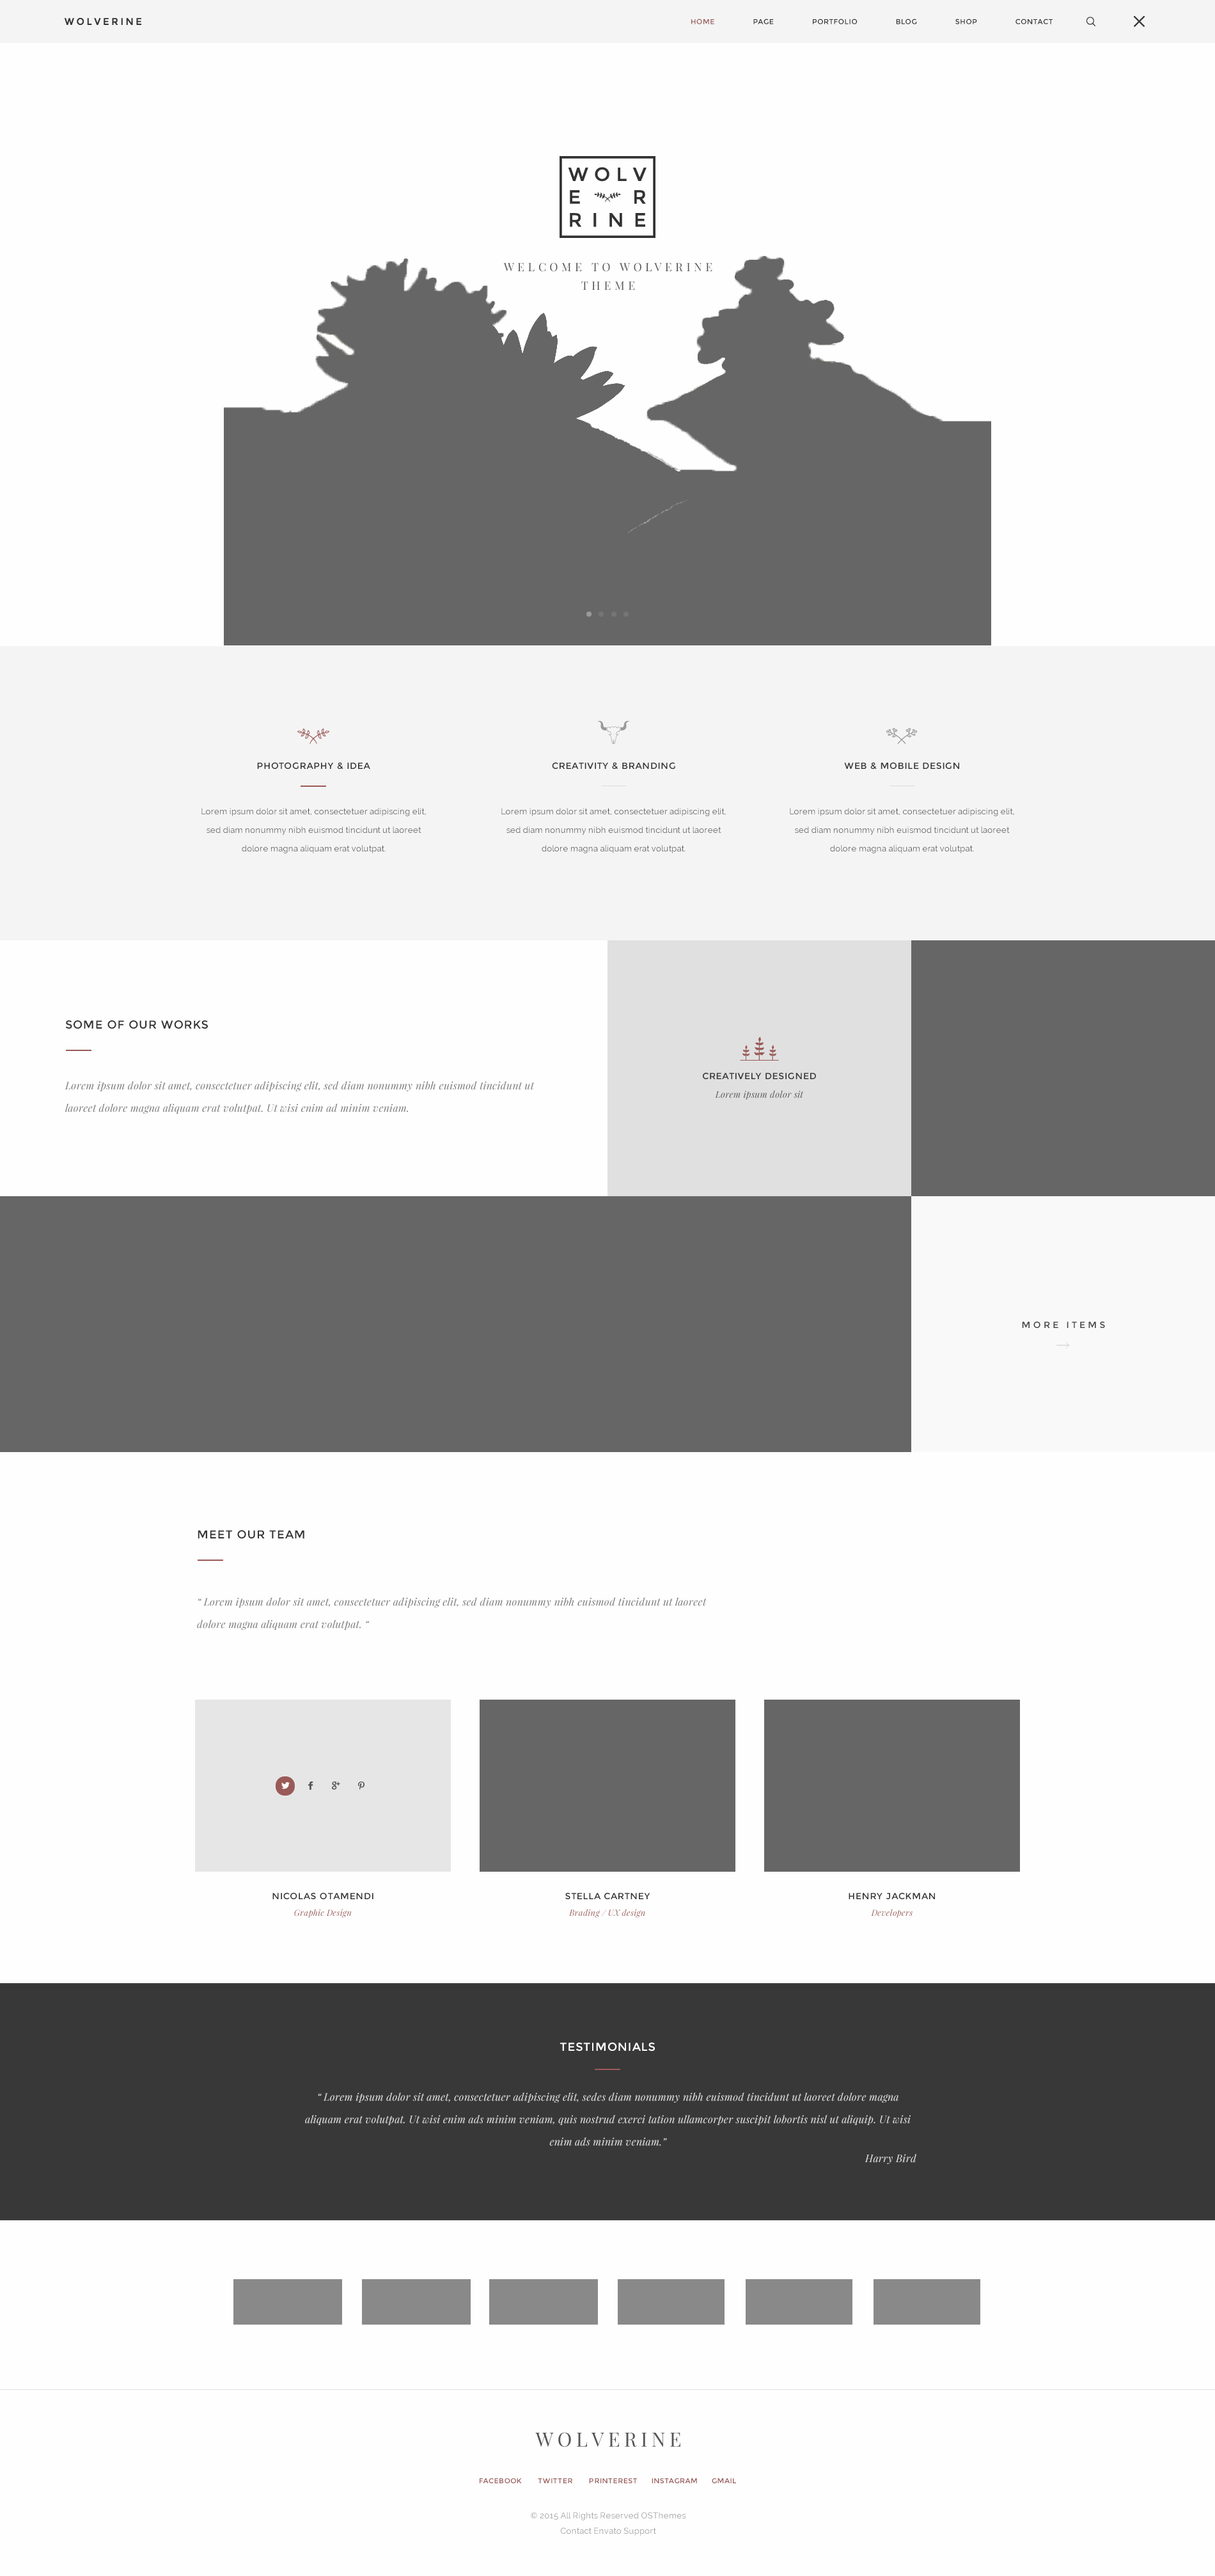
<style>
.page{position:relative;width:1215px;height:2576px;background:#fefefe}
.page>*{position:absolute;margin:0}
.t1{font:7.2px "Montserrat-Regular";letter-spacing:0.05em;color:#333333}
.t2{font:7.2px "Montserrat-Regular";letter-spacing:0.05em;color:#995958}
.t3{font:11.5px/18.4px "PlayfairDisplay-Regular";letter-spacing:0.3em;color:#555555}
.t4{font:9px "Montserrat-Regular";letter-spacing:0.05em;color:#333333}
.t5{font:8.3px/18.3px "Raleway";letter-spacing:0.02em;color:#555555}
.t6{font:11.5px "Montserrat-Regular";letter-spacing:0.05em;color:#333333}
.t7{font:10.2px/22.5px "PlayfairDisplay-Italic";letter-spacing:0.02em;color:#777777}
.t8{font:9px "PlayfairDisplay-Italic";letter-spacing:0.02em;color:#545454}
.t9{font:9px "Montserrat-Regular";letter-spacing:0.3em;color:#444444}
.t10{font:8.3px "PlayfairDisplay-Italic";letter-spacing:0.02em;color:#995958}
.t11{font:11.5px "Montserrat-Regular";letter-spacing:0.05em;color:#ffffff}
.t12{font:10.2px/22.5px "PlayfairDisplay-Italic";letter-spacing:0.02em;color:#dddddd}
.t13{font:10.2px/16.4px "PlayfairDisplay-Italic";letter-spacing:0.02em;color:#dddddd}
.t14{font:19.8px "PlayfairDisplay-Regular";letter-spacing:0.1em;color:#555555}
.t15{font:7px "Montserrat-Regular";letter-spacing:0.05em;color:#995958}
.t16{font:8.3px/15px "Raleway";letter-spacing:0.02em;color:#999999}
</style>
<div class="page">
<p class="t1" style="left:691px;top:19px;width:362px;height:5px"><span class="t2">HOME</span>          PAGE          PORTFOLIO          BLOG          SHOP          CONTACT</p>
<p class="t3" style="left:503px;top:263px;width:210px;height:27px;text-align:center">WELCOME TO WOLVERINE THEME</p>
<p class="t4" style="left:257px;top:763px;width:113px;height:7px">PHOTOGRAPHY &amp; IDEA</p>
<p class="t4" style="left:552px;top:763px;width:124px;height:7px">CREATIVITY &amp; BRANDING</p>
<p class="t4" style="left:844px;top:763px;width:116px;height:7px">WEB &amp; MOBILE DESIGN</p>
<p class="t5" style="left:201px;top:808px;width:225px;height:45px;text-align:center">Lorem ipsum dolor sit amet, consectetuer adipiscing elit, sed diam nonummy nibh euismod tincidunt ut laoreet dolore magna aliquam erat volutpat.</p>
<p class="t5" style="left:502px;top:808px;width:224px;height:45px;text-align:center">Lorem ipsum dolor sit amet, consectetuer adipiscing elit, sed diam nonummy nibh euismod tincidunt ut laoreet dolore magna aliquam erat volutpat.</p>
<p class="t5" style="left:790px;top:808px;width:225px;height:45px;text-align:center">Lorem ipsum dolor sit amet, consectetuer adipiscing elit, sed diam nonummy nibh euismod tincidunt ut laoreet dolore magna aliquam erat volutpat.</p>
<p class="t6" style="left:65px;top:1020px;width:143px;height:9px">SOME OF OUR WORKS</p>
<p class="t4" style="left:703px;top:1073px;width:113px;height:6px">CREATIVELY DESIGNED</p>
<p class="t7" style="left:65px;top:1081px;width:470px;height:33px">Lorem ipsum dolor sit amet, consectetuer adipiscing elit, sed diam nonummy nibh euismod tincidunt ut laoreet dolore magna aliquam erat volutpat. Ut wisi enim ad minim veniam.</p>
<p class="t8" style="left:715px;top:1090px;width:89px;height:10px">Lorem ipsum dolor sit</p>
<p class="t9" style="left:1022px;top:1322px;width:83px;height:6px">MORE ITEMS</p>
<p class="t6" style="left:198px;top:1530px;width:106px;height:9px">MEET OUR TEAM</p>
<p class="t7" style="left:197px;top:1597px;width:510px;height:33px">“ Lorem ipsum dolor sit amet, consectetuer adipiscing elit, sed diam nonummy nibh euismod tincidunt ut laoreet dolore magna aliquam erat volutpat. “</p>
<p class="t4" style="left:273px;top:1893px;width:101px;height:6px">NICOLAS OTAMENDI</p>
<p class="t4" style="left:565px;top:1893px;width:86px;height:6px">STELLA CARTNEY</p>
<p class="t4" style="left:849px;top:1893px;width:86px;height:6px">HENRY JACKMAN</p>
<p class="t10" style="left:294px;top:1909px;width:58px;height:9px">Graphic Design</p>
<p class="t10" style="left:569px;top:1909px;width:76px;height:9px">Brading / UX design</p>
<p class="t10" style="left:871px;top:1909px;width:42px;height:9px">Developers</p>
<p class="t11" style="left:560px;top:2043px;width:95px;height:8px">TESTIMONIALS</p>
<p class="t12" style="left:305px;top:2092px;width:612px;height:72px;text-align:center">“ Lorem ipsum dolor sit amet, consectetuer adipiscing elit, sedes diam nonummy nibh euismod tincidunt ut laoreet dolore magna aliquam erat volutpat. Ut wisi enim ads minim veniam, quis nostrud exerci tation ullamcorper suscipit lobortis nisl ut aliquip. Ut wisi enim ads minim veniam.”<br><span class="t13">Harry Bird</span></p>
<p class="t14" style="left:535px;top:2432px;width:146px;height:15px">WOLVERINE</p>
<p class="t15" style="left:480px;top:2478px;width:256px;height:5px">FACEBOOK       TWITTER       PRINTEREST      INSTAGRAM      GMAIL</p>
<p class="t16" style="left:531px;top:2512px;width:155px;height:24px;text-align:center">© 2015 All Rights Reserved OSThemes<br>Contact Envato Support</p>
</div>
